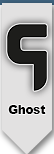
<style>
.page{position:relative;width:54px;height:154px;background:#e2e1e1}
.page>*{position:absolute;margin:0}
.t1{font:11.7px "Arial-Black";letter-spacing:-0.01em;color:#000000}
</style>
<div class="page">
<p class="t1" style="left:8px;top:105px;width:38px;height:9px">Ghost</p>
</div>
